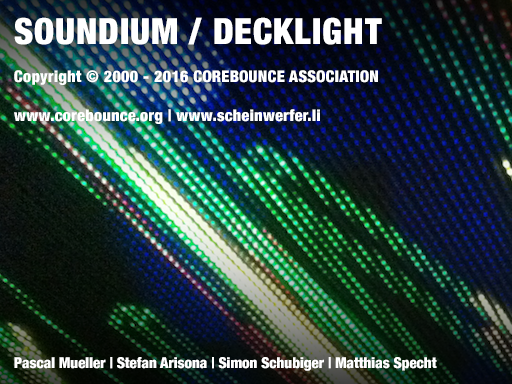
<style>
.page{position:relative;width:512px;height:384px}
.page>*{position:absolute;margin:0}
.t1{font:16px "HelveticaNeue-CondensedBlack";letter-spacing:0.025em;color:#ffffff}
.t2{font:36px "HelveticaNeue-CondensedBlack";letter-spacing:0.025em;color:#ffffff}
.t3{font:15px "HelveticaNeue-CondensedBlack";color:#ffffff}
</style>
<div class="page">
<p class="t1" style="left:14px;top:17px;width:368px;height:107px"><span class="t2">SOUNDIUM / DECKLIGHT<br></span><br>Copyright © 2000 - 2016 COREBOUNCE ASSOCIATION<br><br>www.corebounce.org | www.scheinwerfer.li</p>
<p class="t3" style="left:14px;top:357px;width:423px;height:14px">Pascal Mueller | Stefan Arisona | Simon Schubiger | Matthias Specht</p>
</div>
